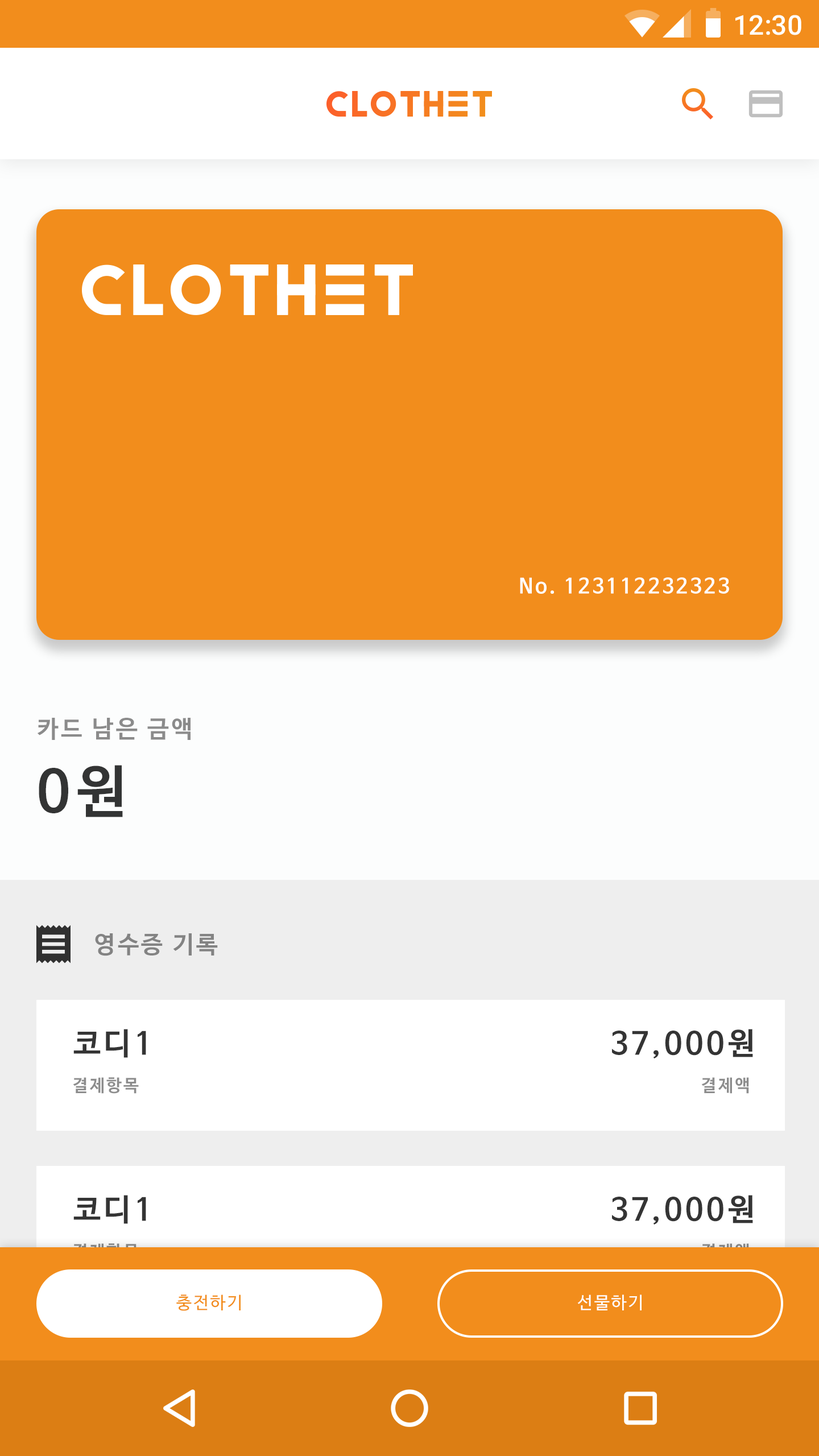
<style>
.page{position:relative;width:819px;height:1456px;background:#f28d1c}
.page>*{position:absolute;margin:0}
.t1{font:27.3px "Roboto-Medium";color:#ffffff}
.t2{font:20.5px "NanumBarunGothicBold";letter-spacing:0.1em;color:#ffffff}
.t3{font:23.9px "NanumBarunGothicBold";letter-spacing:0.1em;color:#8b8b8b}
.t4{font:56.9px "NanumBarunGothicBold";letter-spacing:0.1em;color:#333434}
.t5{font:23.9px "NanumBarunGothicBold";letter-spacing:0.1em;color:#838383}
.t6{font:30.7px "NanumBarunGothicBold";letter-spacing:0.1em;color:#343434}
.t7{font:17.1px "NanumBarunGothicBold";letter-spacing:0.1em;color:#8d8d8d}
.t8{font:17.1px "NanumBarunGothicBold";letter-spacing:0.1em;color:#f28d1c}
.t9{font:17.1px "NanumBarunGothic";letter-spacing:0.1em;color:#f28d1c}
.t10{font:17.1px "NanumBarunGothic";letter-spacing:0.1em;color:#ffffff}
</style>
<div class="page">
<p class="t1" style="left:735px;top:15px;width:66px;height:20px">12:30</p>
<p class="t2" style="left:520px;top:577px;width:209px;height:17px">No. 123112232323</p>
<p class="t3" style="left:37px;top:718px;width:154px;height:22px">카드 남은 금액</p>
<p class="t4" style="left:39px;top:765px;width:84px;height:52px">0원</p>
<p class="t5" style="left:95px;top:933px;width:123px;height:23px">영수증 기록</p>
<p class="t6" style="left:73px;top:1029px;width:73px;height:29px">코디1</p>
<p class="t6" style="left:612px;top:1029px;width:141px;height:29px">37,000원</p>
<p class="t7" style="left:73px;top:1077px;width:66px;height:17px">결제항목</p>
<p class="t7" style="left:701px;top:1077px;width:48px;height:17px">결제액</p>
<p class="t6" style="left:73px;top:1195px;width:73px;height:29px">코디1</p>
<p class="t6" style="left:612px;top:1195px;width:141px;height:30px">37,000원</p>
<p class="t8" style="left:73px;top:1243px;width:66px;height:17px">결제항목</p>
<p class="t8" style="left:701px;top:1243px;width:48px;height:17px">결제액</p>
<p class="t9" style="left:176px;top:1294px;width:65px;height:17px">충전하기</p>
<p class="t10" style="left:577px;top:1294px;width:65px;height:16px">선물하기</p>
</div>
